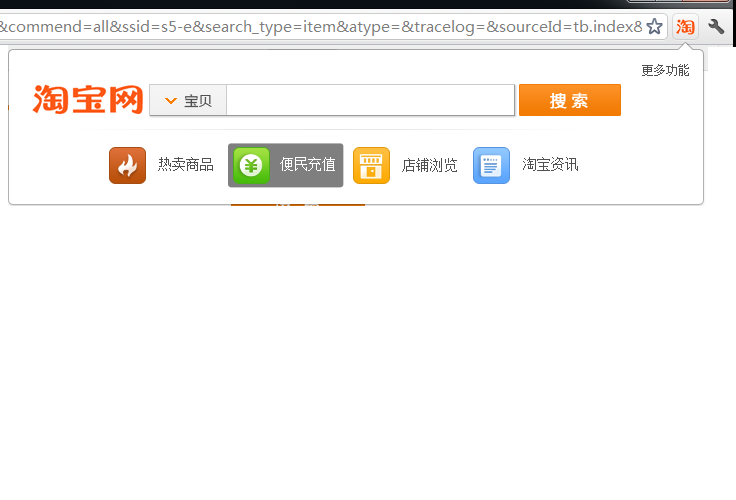
<style>
.page{position:relative;width:736px;height:500px;background:#ffffff}
.page>*{position:absolute;margin:0}
.t1{font:12px "SimSun";color:#505050}
.t2{font:14px "MicrosoftYaHei";color:#505050}
.t3{font:14px "SimSun";color:#505050}
.t4{font:14px "SimSun";color:#ffffff}
</style>
<div class="page">
<p class="t1" style="left:642px;top:64px;width:47px;height:12px">更多功能</p>
<p class="t2" style="left:184px;top:94px;width:28px;height:14px">宝贝</p>
<p class="t3" style="left:158px;top:157px;width:55px;height:14px">热卖商品</p>
<p class="t4" style="left:280px;top:157px;width:55px;height:14px">便民充值</p>
<p class="t3" style="left:402px;top:158px;width:55px;height:14px">店铺浏览</p>
<p class="t3" style="left:523px;top:157px;width:55px;height:14px">淘宝资讯</p>
</div>
